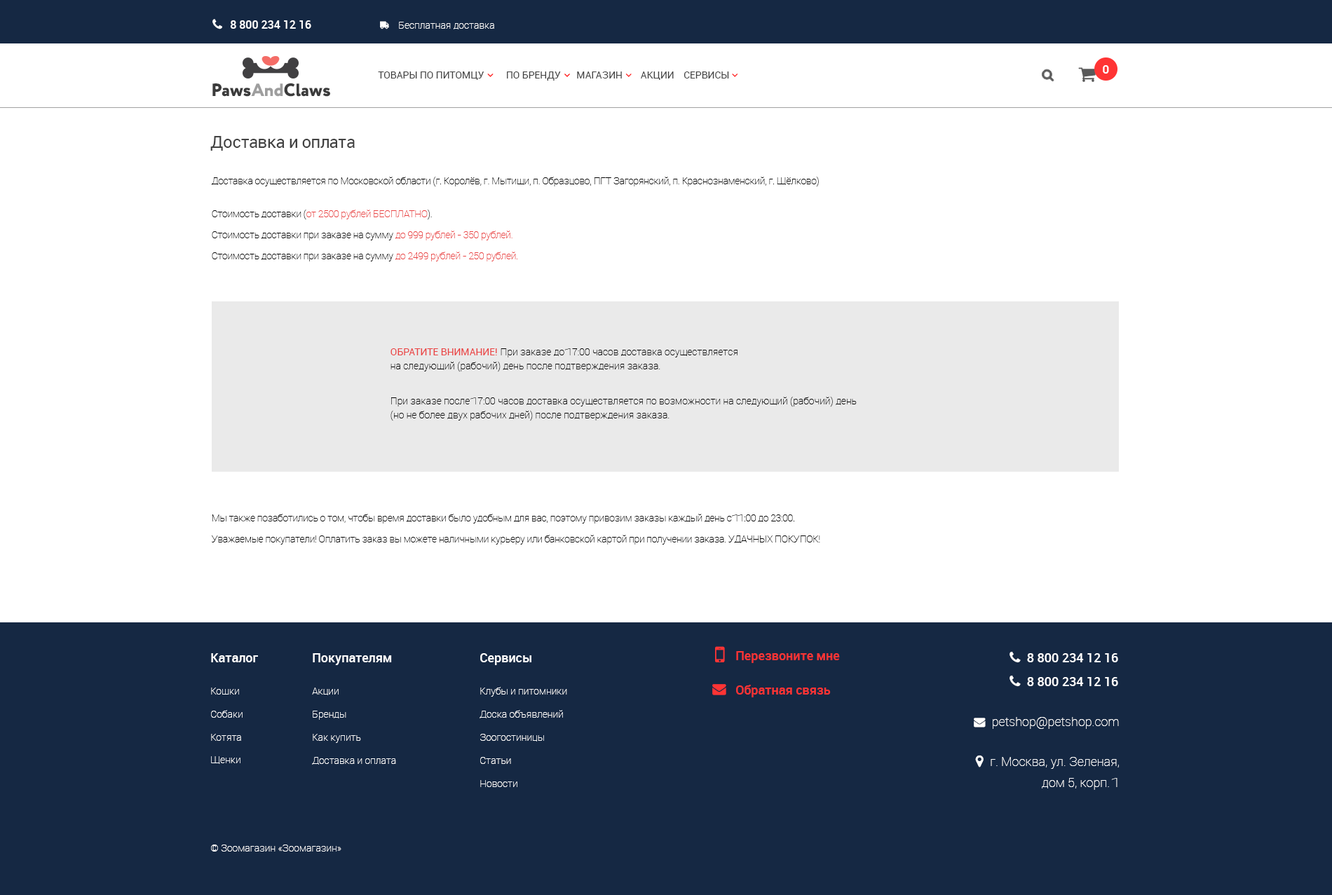
<style>
.page{position:relative;width:1332px;height:895px;background:#ffffff}
.page>*{position:absolute;margin:0}
.t1{font:11.2px "Roboto-Medium";color:#ffffff}
.t2{font:9.8px "Roboto-Thin";color:#ffffff}
.t3{font:11.8px "Roboto-Light";color:#ffffff}
.t4{font:17.8px "Circe-ExtraBold";color:#3b3b3b}
.t5{font:17.8px "Circe-ExtraBold";color:#9e9e9e}
.t6{font:16.8px "Roboto-Regular";letter-spacing:-0.02em;color:#424242}
.t7{font:9.8px/14px "Roboto-Thin";letter-spacing:-0.02em;color:#000000}
.t8{font:9.8px/32.9px "Roboto-Thin";letter-spacing:-0.02em;color:#000000}
.t9{font:9.8px/11.2px "Roboto-Thin";letter-spacing:-0.02em;color:#000000}
.t10{font:9.8px/11.2px "Roboto-Thin";letter-spacing:-0.02em;color:#ea4343}
.t11{font:9.8px/11.2px "Roboto-Thin";letter-spacing:-0.02em;color:#ea4343;text-transform:uppercase}
.t12{font:9.8px/21px "Roboto-Thin";letter-spacing:-0.02em;color:#000000}
.t13{font:9.8px/21px "Roboto-Thin";letter-spacing:-0.02em;color:#ea4343}
.t14{font:9.8px/14px "Roboto-Thin";color:#000000}
.t15{font:9.8px/14px "Roboto-Regular";color:#ea4343;text-transform:uppercase}
.t16{font:9.8px/35.1px "Roboto-Thin";color:#000000}
.t17{font:9.8px/21px "Roboto-Thin";letter-spacing:-0.02em;color:#000000;text-transform:uppercase}
.t18{font:9.8px/23.1px "Roboto-Thin";color:#ffffff}
.t19{font:12.6px/18.1px "Roboto-Medium";color:#ffffff}
.t20{font:9.8px/32.2px "Roboto-Thin";color:#ffffff}
.t21{font:12.6px "Roboto-Medium";color:#ff3434}
</style>
<div class="page">
<p class="t1" style="left:230px;top:20px;width:81px;height:9px">8 800 234 12 16</p>
<p class="t2" style="left:399px;top:22px;width:95px;height:7px">Бесплатная доставка</p>
<p class="t3" style="left:1103px;top:65px;width:6px;height:9px">0</p>
<p class="t4" style="left:212px;top:83px;width:118px;height:14px">Paws<span class="t5">And</span>Claws</p>
<p class="t6" style="left:210px;top:136px;width:145px;height:15px">Доставка и оплата</p>
<p class="t7" style="left:212px;top:176px;width:607px;height:85px">Доставка осуществляется по Московской области (г. Королёв, г. Мытищи, п. Образцово, ПГТ Загорянский, п. Краснознаменский, г. Щёлково)<br><span class="t8">Стоимость достав</span><span class="t9">ки (</span><span class="t10">от 2500 рублей </span><span class="t11">бесплатно</span><span class="t9">).<br></span><span class="t12">Стоимость доставки при заказе на сумму </span><span class="t13">до 999 рублей - 350 рублей. <br></span><span class="t12">Стоимость доставки при заказе на сумму </span><span class="t13">до 2499 рублей - 250 рублей.</span></p>
<p class="t14" style="left:390px;top:348px;width:467px;height:73px"><span class="t15">Обратите внимание! </span>При заказе до 17:00 часов доставка осуществляется<br>на следующий (рабочий) день после подтверждения заказа. <br><span class="t16">При заказе после 17:00 часов доставка осуществляется по возможности на следующий (рабочий) день <br></span>(но не более двух рабочих дней) после подтверждения заказа.</p>
<p class="t7" style="left:212px;top:514px;width:608px;height:31px">Мы также позаботились о том, чтобы время доставки было удобным для вас, поэтому привозим заказы каждый день с 11:00 до 23:00.<br><span class="t12">Уважаемые покупатели! Оплатить заказ вы можете наличными курьеру или банковской картой при получении заказа. </span><span class="t17">Удачных покупок!</span></p>
<p class="t18" style="left:211px;top:653px;width:47px;height:111px"><span class="t19">Каталог<br></span><span class="t20">Кошки<br></span>Собаки<br>Котята<br>Щенки</p>
<p class="t18" style="left:312px;top:653px;width:84px;height:112px"><span class="t19">Покупателям<br></span><span class="t20">Акции<br></span>Бренды<br>Как купить<br>Доставка и оплата</p>
<p class="t18" style="left:480px;top:653px;width:87px;height:134px"><span class="t19">Сервисы<br></span><span class="t20">Клубы и питомники<br></span>Доска объявлений<br>Зоогостиницы<br>Статьи<br>Новости</p>
<p class="t21" style="left:736px;top:651px;width:104px;height:12px">Перезвоните мне</p>
<p class="t21" style="left:736px;top:685px;width:95px;height:13px">Обратная связь</p>
<p class="t2" style="left:211px;top:845px;width:130px;height:7px">© Зоомагазин «Зоомагазин»</p>
</div>
